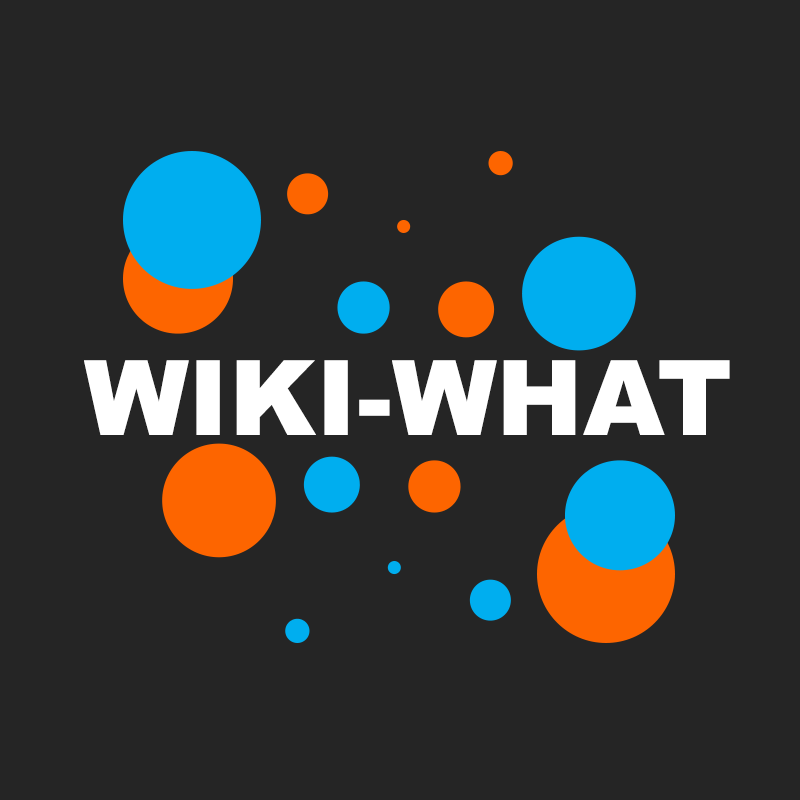
<style>
.page{position:relative;width:800px;height:800px;background:#252525}
.page>*{position:absolute;margin:0}
.t1{font:104.4px "Arial-Black";color:#ffffff}
</style>
<div class="page">
<p class="t1" style="left:84px;top:360px;width:646px;height:75px">WIKI-WHAT</p>
</div>
